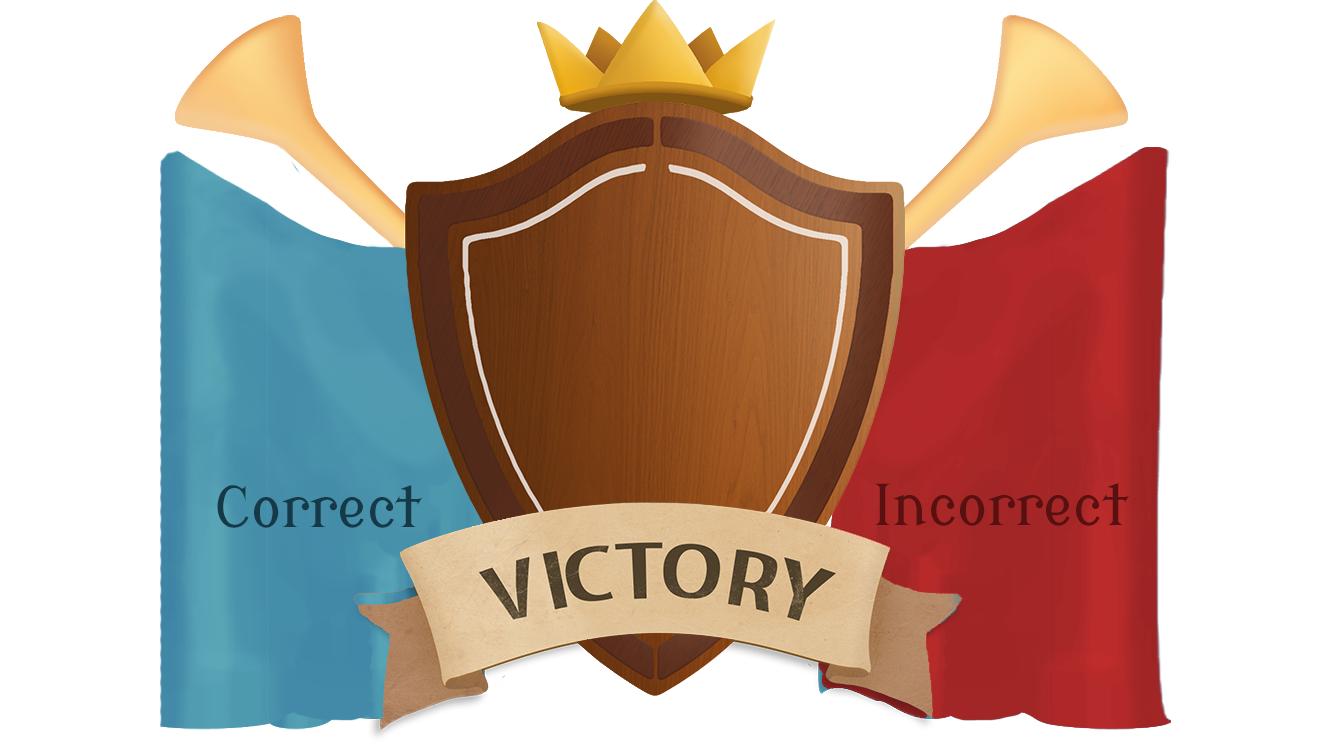
<style>
.page{position:relative;width:1317px;height:743px;background:#ffffff}
.page>*{position:absolute;margin:0}
.t1{font:55.8px "ModernAntiqua-Regular";color:#153946}
.t2{font:55.8px "ModernAntiqua-Regular";color:#591010}
</style>
<div class="page">
<p class="t1" style="left:217px;top:485px;width:206px;height:43px">Correct</p>
<p class="t2" style="left:874px;top:483px;width:256px;height:43px">Incorrect</p>
</div>
